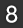
<style>
.page{position:relative;width:23px;height:28px;background:#333333}
.page>*{position:absolute;margin:0}
.t1{font:24px "Outfit-Regular";color:#ffffff;font-weight:bold;font-style:italic}
</style>
<div class="page">
<p class="t1" style="left:6px;top:5px;width:12px;height:18px">8</p>
</div>
